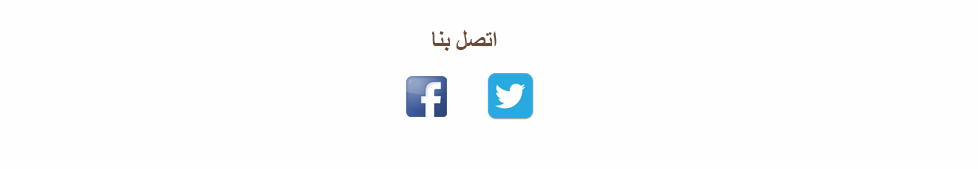
<style>
.page{position:relative;width:978px;height:169px;background:#fefefe}
.page>*{position:absolute;margin:0}
.t1{font:24px "TimesNewRomanPS-BoldMT";color:#6a4835}
</style>
<div class="page">
<p class="t1" style="left:431px;top:30px;width:66px;height:21px">اتصل بنا</p>
</div>
